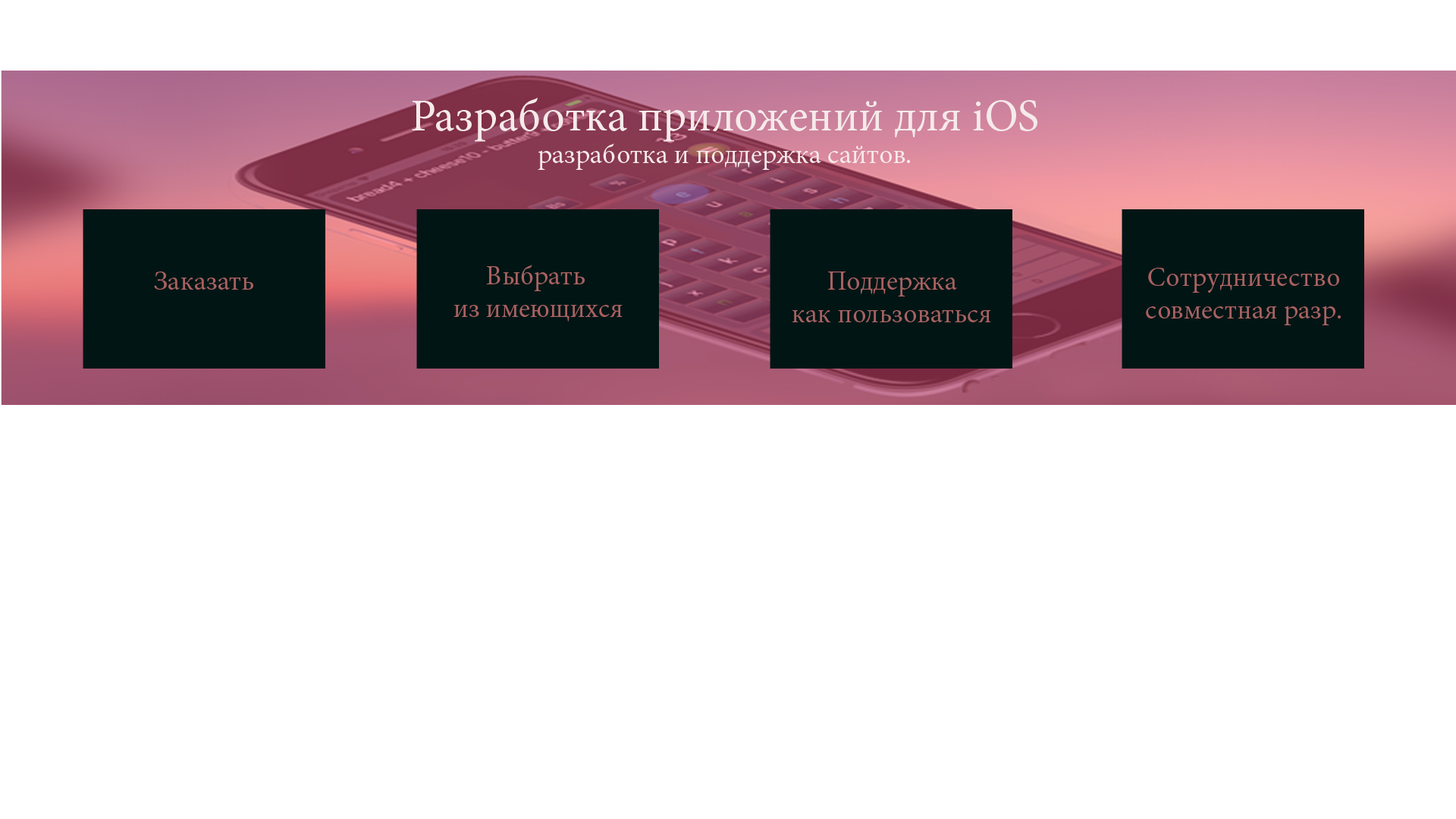
<style>
.page{position:relative;width:1456px;height:819px;background:#ffffff}
.page>*{position:absolute;margin:0}
.t1{font:27.3px "MinionPro-Regular";color:#f5eaea}
.t2{font:45.5px "MinionPro-Regular";color:#f5eaea}
.t3{font:27.3px "MinionPro-Regular";color:#a96161}
</style>
<div class="page">
<p class="t1" style="left:412px;top:98px;width:625px;height:72px;text-align:center"><span class="t2">Разработка приложений для iOS<br></span>разработка и поддержка сайтов.</p>
<p class="t3" style="left:453px;top:265px;width:170px;height:57px;text-align:center">Выбрать <br>из имеющихся</p>
<p class="t3" style="left:1146px;top:268px;width:195px;height:57px;text-align:center">Сотрудничество<br>совместная разр.</p>
<p class="t3" style="left:154px;top:271px;width:99px;height:19px">Заказать</p>
<p class="t3" style="left:792px;top:271px;width:199px;height:51px;text-align:center">Поддержка<br>как пользоваться</p>
</div>
